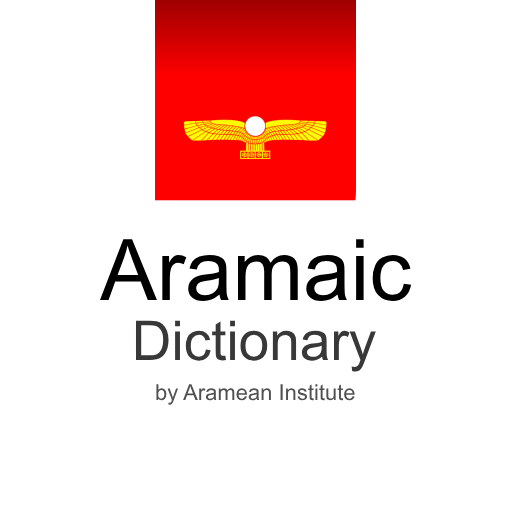
<style>
.page{position:relative;width:512px;height:512px;background:#ffffff}
.page>*{position:absolute;margin:0}
.t1{font:85px "ArialMT";color:#000000}
.t2{font:55px "ArialMT";color:#383838}
.t3{font:22px "ArialMT";color:#505050}
</style>
<div class="page">
<p class="t1" style="left:100px;top:239px;width:312px;height:62px">Aramaic</p>
<p class="t2" style="left:135px;top:320px;width:241px;height:52px">Dictionary</p>
<p class="t3" style="left:156px;top:384px;width:199px;height:21px">by Aramean Institute</p>
</div>
